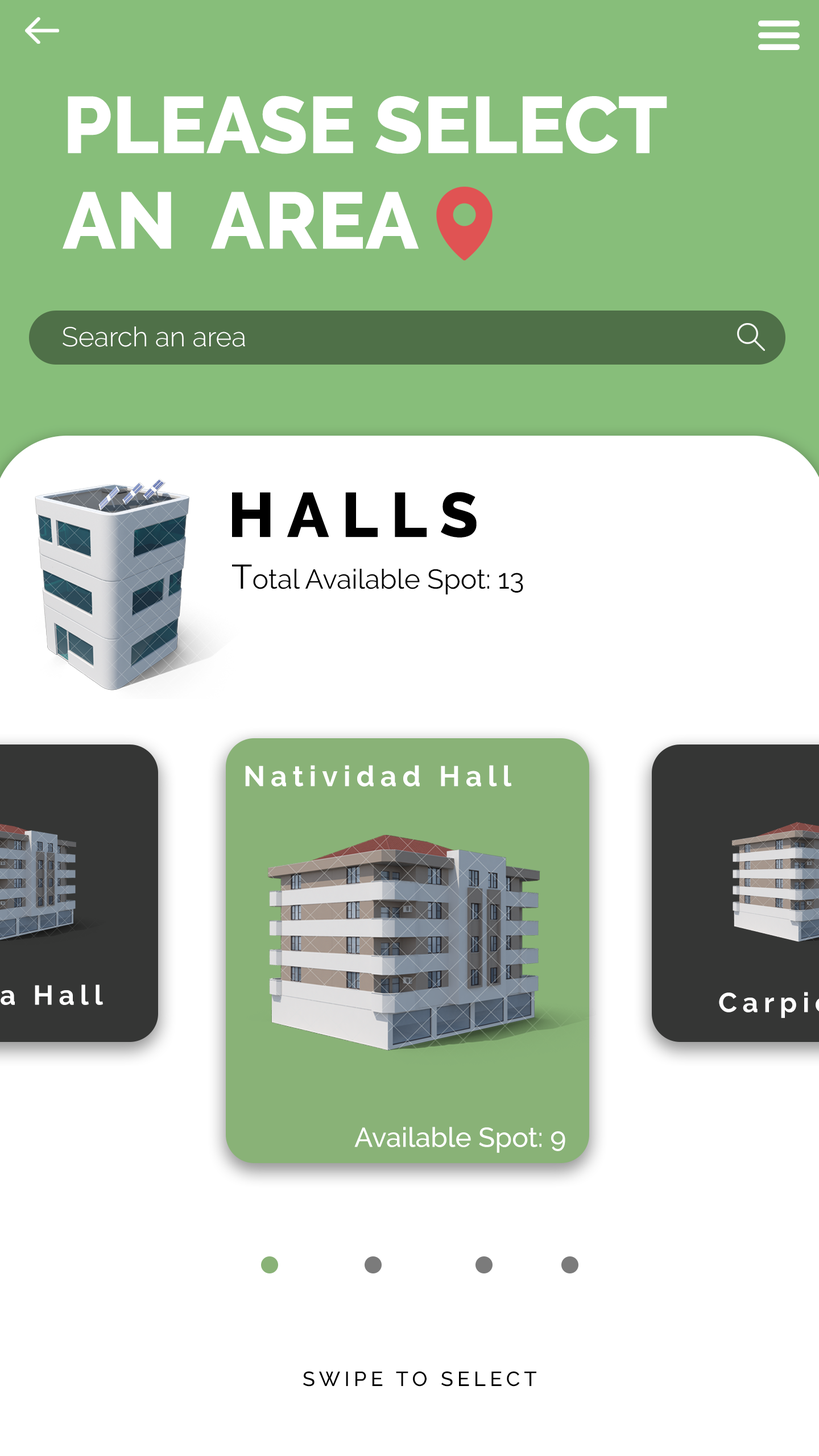
<style>
.page{position:relative;width:819px;height:1456px;background:#ffffff}
.page>*{position:absolute;margin:0}
.t1{font:79.6px "Raleway-ExtraBold";color:#ffffff}
.t2{font:27.3px "Raleway-Light";color:#ffffff}
.t3{font:62.6px "Raleway-ExtraBold";letter-spacing:0.2em;color:#000000}
.t4{font:27.3px "Raleway-Regular";color:#000000}
.t5{font:34.1px "Raleway-Regular";color:#000000}
.t6{font:28.4px "Raleway-Bold";letter-spacing:0.2em;color:#ffffff}
.t7{font:27.3px "Raleway-Medium";color:#ffffff}
.t8{font:20.5px "Raleway-Medium";letter-spacing:0.2em;color:#000000}
</style>
<div class="page">
<p class="t1" style="left:63px;top:96px;width:604px;height:153px">PLEASE SELECT <br>AN  AREA</p>
<p class="t2" style="left:63px;top:326px;width:182px;height:21px">Search an area</p>
<p class="t3" style="left:232px;top:492px;width:245px;height:45px">HALLS</p>
<p class="t4" style="left:232px;top:564px;width:291px;height:31px"><span class="t5">T</span>otal Available Spot: 13</p>
<p class="t6" style="left:245px;top:765px;width:267px;height:22px">Natividad Hall</p>
<p class="t7" style="left:354px;top:1127px;width:211px;height:26px">Available Spot: 9</p>
<p class="t8" style="left:303px;top:1371px;width:233px;height:16px">SWIPE TO SELECT</p>
</div>
